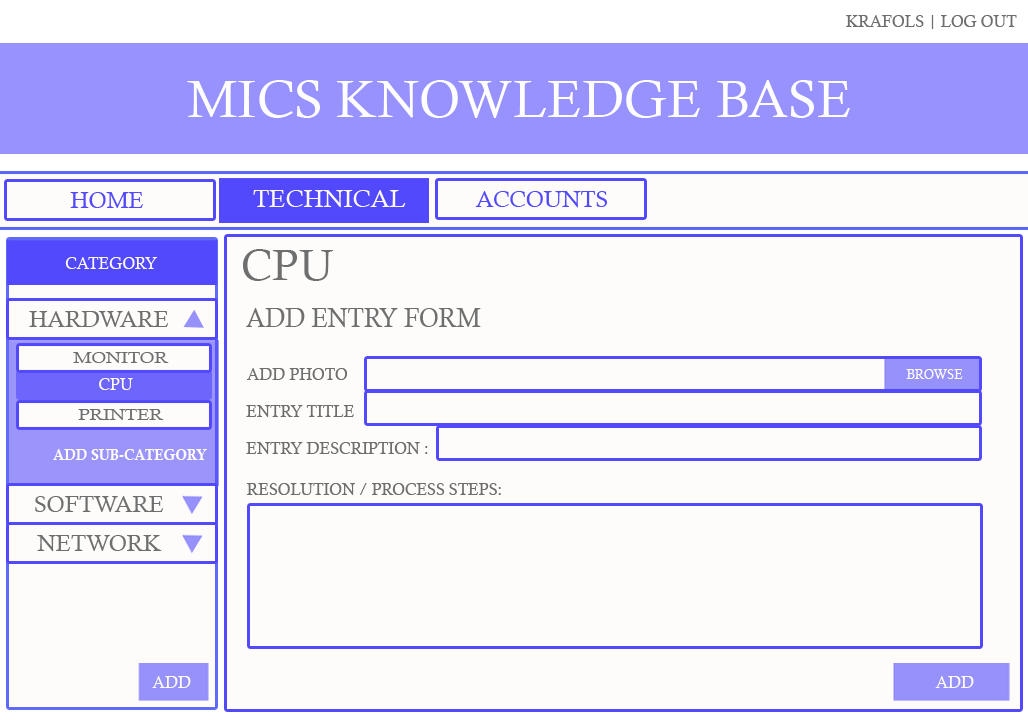
<style>
.page{position:relative;width:1028px;height:720px;background:#fdfcfa}
.page>*{position:absolute;margin:0}
.t1{font:16px "CalistoMT";color:#6e6e6f}
.t2{font:52.3px "CalistoMT";color:#fefeff}
.t3{font:22.8px "CalistoMT";color:#5249fc}
.t4{font:24.8px "CalistoMT";color:#fdfcf9}
.t5{font:16px "CalistoMT";color:#fdfcf9}
.t6{font:43.4px "CalistoMT";color:#6e6e6f}
.t7{font:22.8px "CalistoMT";color:#6e6e6f}
.t8{font:27.8px "CalistoMT";color:#6e6e6f;scale:0.88 1}
.t9{font:15.2px "CalistoMT";color:#6e6e6f;scale:1.22 1}
.t10{font:13.1px "CalistoMT";color:#fdfcf9}
.t11{font:14.8px "CalisMTBol";color:#fdfcf9;scale:0.95 1}
</style>
<div class="page">
<p class="t1" style="left:846px;top:15px;width:171px;height:14px">KRAFOLS | LOG OUT</p>
<p class="t2" style="left:187px;top:80px;width:663px;height:38px">MICS KNOWLEDGE BASE</p>
<p class="t3" style="left:70px;top:192px;width:73px;height:16px">HOME</p>
<p class="t4" style="left:253px;top:190px;width:153px;height:18px">TECHNICAL</p>
<p class="t3" style="left:475px;top:191px;width:133px;height:17px">ACCOUNTS</p>
<p class="t5" style="left:65px;top:257px;width:92px;height:12px">CATEGORY</p>
<p class="t6" style="left:243px;top:249px;width:90px;height:32px">CPU</p>
<p class="t7" style="left:29px;top:311px;width:140px;height:16px">HARDWARE</p>
<p class="t8" style="left:246px;top:308px;width:235px;height:20px">ADD ENTRY FORM</p>
<p class="t9" style="left:73px;top:352px;width:96px;height:11px">MONITOR</p>
<p class="t1" style="left:247px;top:368px;width:100px;height:12px">ADD PHOTO</p>
<p class="t10" style="left:906px;top:369px;width:57px;height:10px">BROWSE</p>
<p class="t5" style="left:99px;top:378px;width:34px;height:12px">CPU</p>
<p class="t9" style="left:78px;top:409px;width:86px;height:11px">PRINTER</p>
<p class="t1" style="left:246px;top:405px;width:108px;height:12px">ENTRY TITLE</p>
<p class="t11" style="left:53px;top:449px;width:154px;height:11px">ADD SUB-CATEGORY</p>
<p class="t1" style="left:246px;top:442px;width:182px;height:12px">ENTRY DESCRIPTION :</p>
<p class="t1" style="left:246px;top:483px;width:255px;height:12px">RESOLUTION / PROCESS STEPS:</p>
<p class="t7" style="left:35px;top:496px;width:129px;height:16px">SOFTWARE</p>
<p class="t7" style="left:37px;top:535px;width:125px;height:17px">NETWORK</p>
<p class="t5" style="left:152px;top:676px;width:39px;height:12px">ADD</p>
<p class="t5" style="left:935px;top:676px;width:39px;height:12px">ADD</p>
</div>
